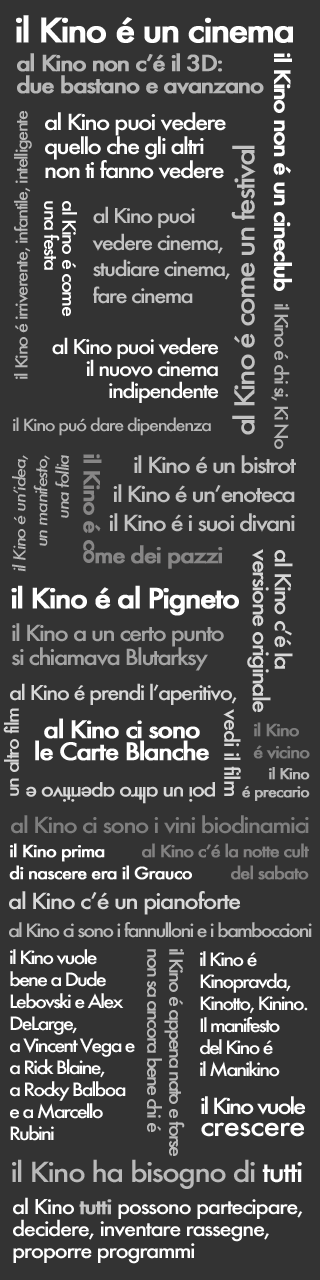
<style>
.page{position:relative;width:320px;height:1280px;background:#333333}
.page>*{position:absolute;margin:0}
.t1{font:32.4px "Futura-Medium";letter-spacing:-0.075em;color:#ffffff;font-weight:bold;scale:1.11 1}
.t2{font:21.6px/22px "Futura-Medium";letter-spacing:-0.075em;color:#b7b7b7;font-weight:bold;scale:1.11 1}
.t3{font:21.6px "Futura-Medium";letter-spacing:-0.075em;color:#ffffff;font-weight:bold;scale:1.11 1}
.t4{font:16.2px "Futura-Medium";letter-spacing:-0.075em;color:#b7b7b7;scale:1.11 1}
.t5{font:21.6px/24px "Futura-Medium";letter-spacing:-0.075em;color:#ffffff;scale:1.11 1}
.t6{font:27px "Futura-Medium";letter-spacing:-0.075em;color:#c2c2c2;scale:1.11 1}
.t7{font:18px/18px "Futura-Medium";letter-spacing:-0.075em;color:#ffffff;scale:1.11 1}
.t8{font:19.8px "Futura-Medium";letter-spacing:-0.075em;color:#c2c2c2;scale:1.11 1}
.t9{font:18px "Futura-Medium";letter-spacing:-0.1em;color:#b2b2b2;scale:1.11 1}
.t10{font:19.8px/22px "Futura-Medium";letter-spacing:-0.075em;color:#ffffff;scale:1.11 1}
.t11{font:16.2px "Futura-MediumItalic";letter-spacing:-0.075em;color:#b7b7b7;scale:1.11 1}
.t12{font:21.6px "Futura-Medium";letter-spacing:-0.075em;color:#878686;font-weight:bold;scale:1.11 1}
.t13{font:21.6px "Futura-Medium";letter-spacing:-0.075em;color:#c2c2c2;scale:1.11 1}
.t14{font:21.6px/22px "Futura-Medium";letter-spacing:-0.075em;color:#d7d7d7;scale:1.11 1}
.t15{font:27px "Futura-Medium";letter-spacing:-0.075em;color:#ffffff;font-weight:bold;scale:1.11 1}
.t16{font:21.6px/24px "Futura-Medium";letter-spacing:-0.075em;color:#a3a3a3;scale:1.11 1}
.t17{font:19.8px "Futura-Medium";letter-spacing:-0.075em;color:#d7d7d7;scale:1.11 1}
.t18{font:18px "Futura-Medium";letter-spacing:-0.075em;color:#d7d7d7;scale:1.11 1}
.t19{font:19.8px "Futura-Medium";letter-spacing:-0.055em;color:#d7d7d7;scale:1.11 1}
.t20{font:23.4px/22px "Futura-Medium";letter-spacing:-0.075em;color:#ffffff;font-weight:bold;scale:1.11 1}
.t21{font:16.2px/22px "Futura-Medium";letter-spacing:-0.075em;color:#7e7e7e;font-weight:bold;scale:1.11 1}
.t22{font:14.4px/18px "Futura-Medium";letter-spacing:-0.075em;color:#b9b9b9;font-weight:bold;scale:1.11 1}
.t23{font:21.6px "Futura-Medium";letter-spacing:-0.065em;color:#7e7e7e;scale:1.11 1}
.t24{font:16.2px/22px "Futura-Medium";letter-spacing:-0.065em;color:#ffffff;font-weight:bold;scale:1.11 1}
.t25{font:16.2px/22px "Futura-Medium";letter-spacing:-0.075em;color:#828181;font-weight:bold;scale:1.11 1}
.t26{font:21.6px "Futura-Medium";letter-spacing:-0.065em;color:#d9d9d9;scale:1.11 1}
.t27{font:18px "Futura-Medium";letter-spacing:-0.1em;color:#b9b9b9;scale:1.11 1}
.t28{font:18px/22px "Futura-Medium";letter-spacing:-0.1em;color:#fffefe;scale:1.11 1}
.t29{font:18px/22px "Futura-Medium";letter-spacing:-0.1em;color:#bababa;scale:1.11 1}
.t30{font:18px/22px "Futura-Medium";letter-spacing:-0.1em;color:#ffffff;scale:1.11 1}
.t31{font:21.6px/22px "Futura-Medium";letter-spacing:-0.1em;color:#ffffff;scale:1.11 1}
.t32{font:27px/22px "Futura-Medium";letter-spacing:-0.035em;color:#ffffff;scale:1.11 1}
.t33{font:27px "Futura-Medium";letter-spacing:-0.06em;color:#bababa;scale:1.11 1}
.t34{font:27px "Futura-Medium";letter-spacing:-0.06em;color:#ffffff;scale:1.11 1}
.t35{font:19.8px/22px "Futura-Medium";letter-spacing:-0.06em;color:#ffffff;scale:1.11 1}
.t36{font:19.8px/22px "Futura-Medium";letter-spacing:-0.06em;color:#c5c5c5;font-weight:bold;scale:1.11 1}
</style>
<div class="page">
<p class="t1" style="left:16px;top:15px;width:277px;height:28px">il Kino é un cinema</p>
<p class="t2" style="left:17px;top:53px;width:247px;height:41px">al Kino non c’é il 3D:<br>due bastano e avanzano</p>
<p class="t3" style="left:273px;top:53px;width:19px;height:238px;rotate:90deg">il Kino non é un cineclub</p>
<p class="t4" style="left:14px;top:110px;width:18px;height:269px;rotate:-90deg">il Kino é irriverente, infantile, intelligente</p>
<p class="t5" style="left:45px;top:112px;width:181px;height:67px">al Kino puoi vedere quello che gli altri non ti fanno vedere</p>
<p class="t6" style="left:231px;top:145px;width:25px;height:290px;rotate:-90deg">al Kino é come un festival</p>
<p class="t7" style="left:44px;top:201px;width:33px;height:116px;rotate:90deg">al Kino é come <br>una festa</p>
<p class="t8" style="left:92px;top:206px;width:138px;height:98px">al Kino puoi vedere cinema, studiare cinema, fare cinema</p>
<p class="t9" style="left:271px;top:304px;width:19px;height:145px;rotate:90deg">il Kino é chi si, Ki No</p>
<p class="t10" style="left:52px;top:337px;width:167px;height:66px;text-align:right">al Kino puoi vedere<br>il nuovo cinema<br> indipendente</p>
<p class="t4" style="left:13px;top:417px;width:198px;height:19px">il Kino puó dare dipendenza</p>
<p class="t11" style="left:12px;top:455px;width:57px;height:117px;text-align:right;rotate:-90deg">il Kino é un’idea,<br> un manifesto, <br>una follia</p>
<p class="t12" style="left:83px;top:454px;width:19px;height:109px;rotate:90deg">il Kino é co</p>
<p class="t13" style="left:109px;top:455px;width:187px;height:77px;text-align:right">il Kino é un bistrot<br>il Kino é un’enoteca<br>il Kino é i suoi divani</p>
<p class="t12" style="left:95px;top:545px;width:128px;height:24px">me dei pazzi</p>
<p class="t14" style="left:247px;top:549px;width:46px;height:164px;rotate:90deg">al Kino c’é la<br>versione originale</p>
<p class="t15" style="left:11px;top:585px;width:228px;height:31px">il Kino é al Pigneto</p>
<p class="t16" style="left:11px;top:623px;width:213px;height:48px">il Kino a un certo punto<br>si chiamava Blutarksy</p>
<p class="t17" style="left:10px;top:683px;width:227px;height:22px">al Kino é prendi l’aperitivo,</p>
<p class="t18" style="left:3px;top:708px;width:16px;height:88px;rotate:-90deg">un altro film</p>
<p class="t19" style="left:223px;top:709px;width:18px;height:87px;rotate:90deg">vedi il film</p>
<p class="t20" style="left:35px;top:718px;width:174px;height:43px;text-align:center">al Kino ci sono<br>le Carte Blanche</p>
<p class="t21" style="left:253px;top:722px;width:57px;height:37px">il Kino<br>é vicino</p>
<p class="t22" style="left:242px;top:767px;width:68px;height:34px;text-align:right">il Kino<br>é precario</p>
<p class="t17" style="left:26px;top:782px;width:189px;height:22px;rotate:180deg">poi un altro aperitivo e</p>
<p class="t23" style="left:11px;top:815px;width:298px;height:19px">al Kino ci sono i vini biodinamici</p>
<p class="t24" style="left:9px;top:843px;width:183px;height:37px">il Kino prima<br>di nascere era il Grauco</p>
<p class="t25" style="left:142px;top:843px;width:167px;height:37px;text-align:right">al Kino c’é la notte cult del sabato</p>
<p class="t26" style="left:9px;top:891px;width:232px;height:24px">al Kino c’é un pianoforte</p>
<p class="t27" style="left:9px;top:922px;width:303px;height:16px">al Kino ci sono i fannulloni e i bamboccioni</p>
<p class="t28" style="left:10px;top:949px;width:125px;height:192px">il Kino vuole bene a Dude Lebovski e Alex DeLarge, <br>a Vincent Vega e a Rick Blaine, <br>a Rocky Balboa e a Marcello Rubini</p>
<p class="t29" style="left:147px;top:949px;width:38px;height:208px;rotate:90deg">il Kino é appena nato e forse<br>non sa ancora bene chi é</p>
<p class="t30" style="left:200px;top:951px;width:108px;height:126px">il Kino é <br>Kinopravda, Kinotto, Kinino.<br>Il manifesto <br>del Kino é <br>il Manikino</p>
<p class="t31" style="left:201px;top:1096px;width:105px;height:41px">il Kino vuole<br><span class="t32">crescere</span></p>
<p class="t33" style="left:12px;top:1159px;width:290px;height:30px">il Kino ha bisogno di <span class="t34">tutti</span></p>
<p class="t35" style="left:13px;top:1197px;width:290px;height:67px">al Kino <span class="t36">tutti </span>possono partecipare, decidere, inventare rassegne, proporre programmi</p>
</div>
